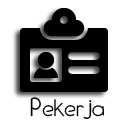
<style>
.page{position:relative;width:128px;height:128px;background:#ffffff}
.page>*{position:absolute;margin:0}
.t1{font:26.2px "ModenoLX";color:#000000}
</style>
<div class="page">
<p class="t1" style="left:30px;top:97px;width:74px;height:22px">Pekerja</p>
</div>
